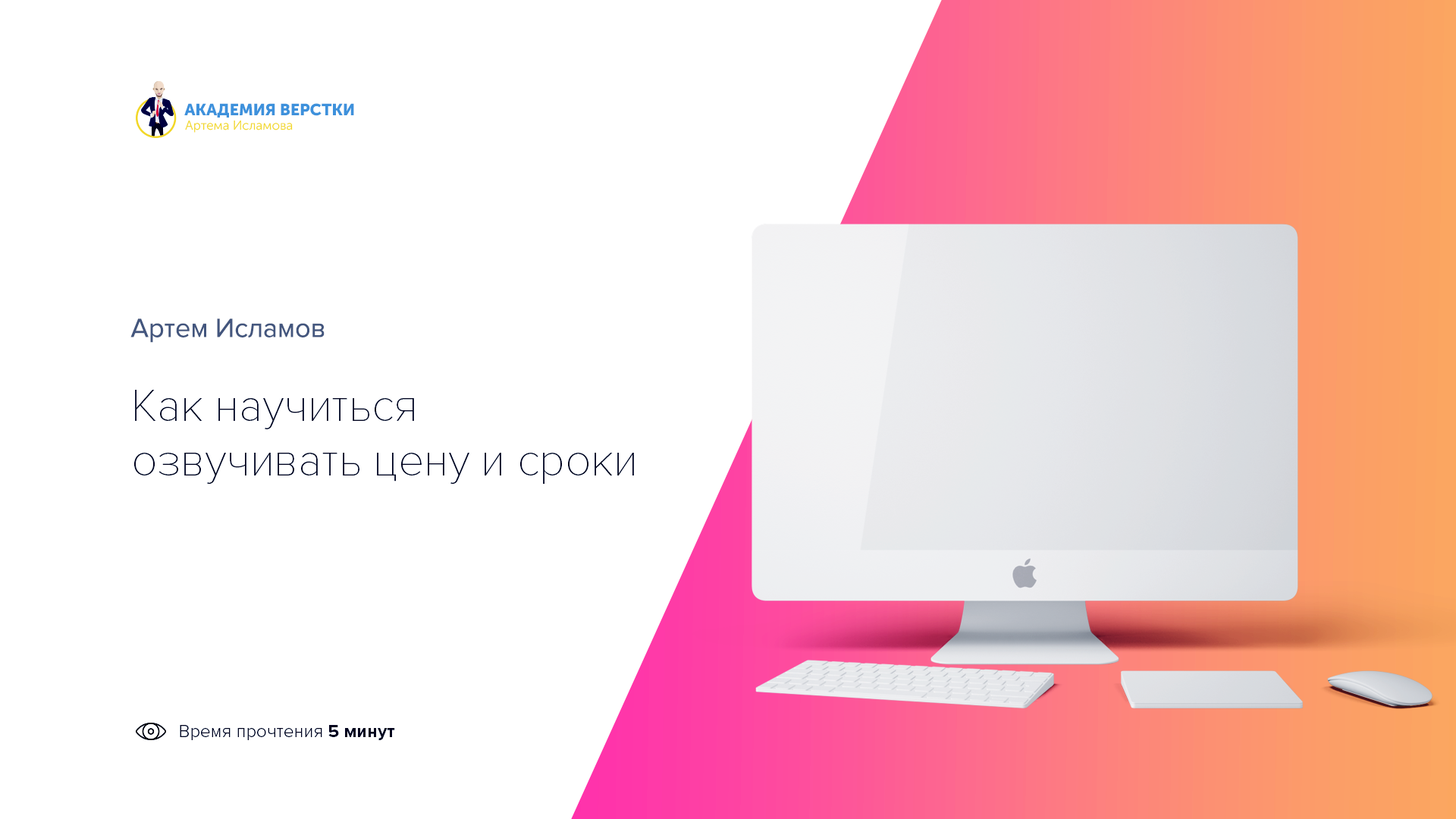
<style>
.page{position:relative;width:1456px;height:819px;background:#ffffff}
.page>*{position:absolute;margin:0}
.t1{font:27.3px "ProximaNova-Regular";color:#43567e}
.t2{font:45.5px "ProximaNovaT-Thin";color:#01011d}
.t3{font:18.2px "ProximaNova-Light";color:#01011d}
.t4{font:18.2px "ProximaNova-Bold";color:#01011d}
</style>
<div class="page">
<p class="t1" style="left:130px;top:318px;width:195px;height:25px">Артем Исламов</p>
<p class="t2" style="left:134px;top:390px;width:500px;height:94px">Как научиться <br>озвучивать цену и сроки</p>
<p class="t3" style="left:180px;top:725px;width:215px;height:15px">Время прочтения <span class="t4">5 минут</span></p>
</div>
